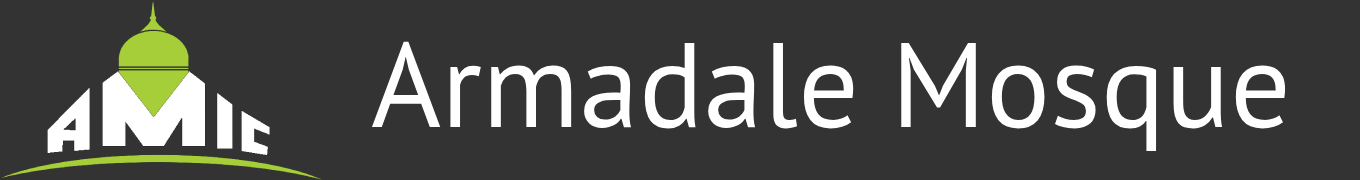
<style>
.page{position:relative;width:1360px;height:180px;background:#333333}
.page>*{position:absolute;margin:0}
.t1{font:120px "PTSans-Regular";color:#ffffff}
</style>
<div class="page">
<p class="t1" style="left:371px;top:41px;width:915px;height:111px">Armadale Mosque</p>
</div>
